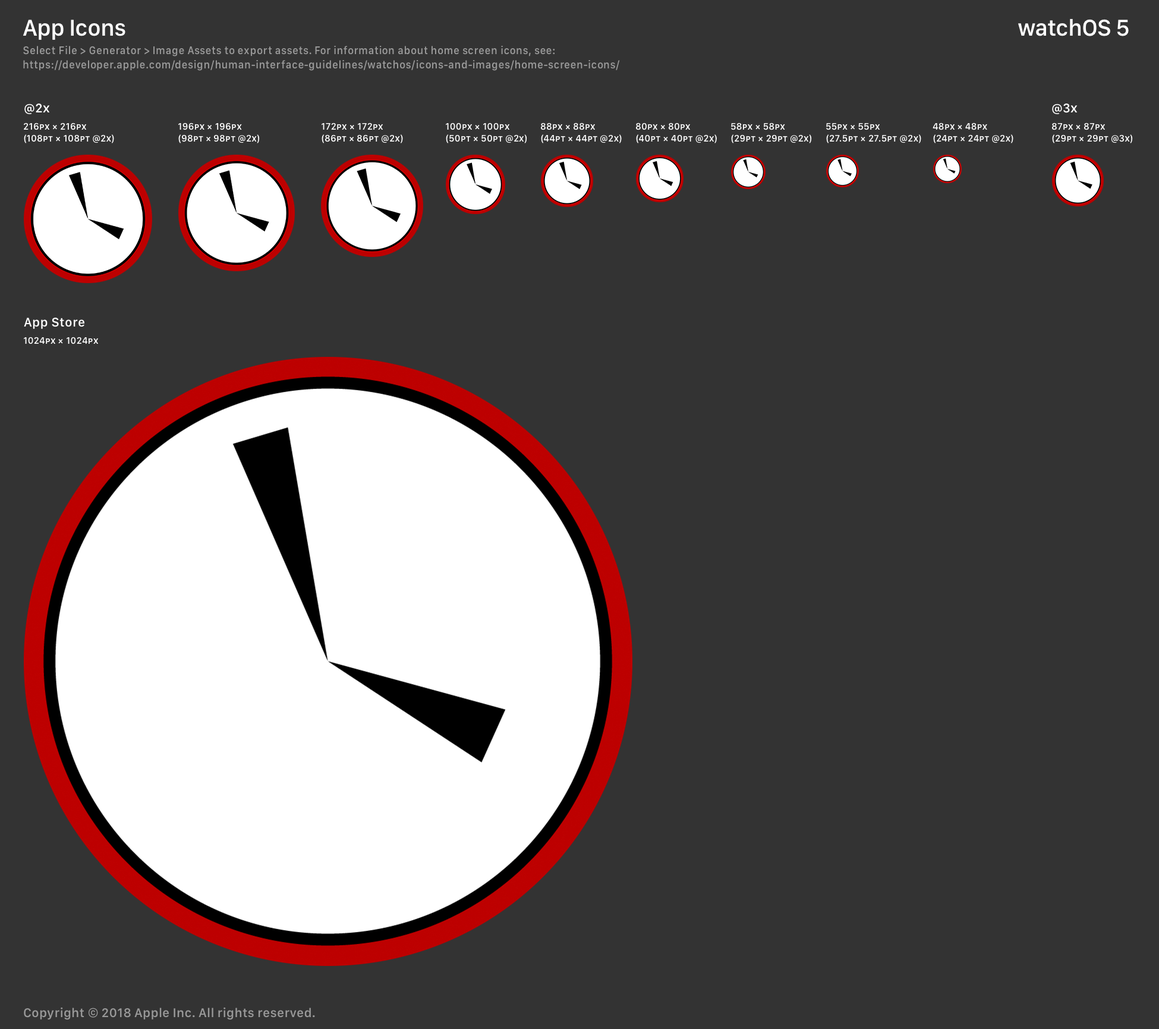
<style>
.page{position:relative;width:1159px;height:1029px;background:#333333}
.page>*{position:absolute;margin:0}
.t1{font:23.8px "SFCompactText-Medium";letter-spacing:-0.026em;color:#ffffff}
.t2{font:10.7px/14.3px "SFCompactText-Medium";letter-spacing:0.024em;color:#999999}
.t3{font:13.1px "SFCompactText-Medium";letter-spacing:0.015em;color:#ffffff;font-variant:small-caps}
.t4{font:9.5px/11.9px "SFCompactText-Medium";letter-spacing:0.015em;color:#ffffff;font-variant:small-caps}
.t5{font:13.1px "SFCompactText-Medium";letter-spacing:0.015em;color:#ffffff}
.t6{font:9.5px "SFCompactText-Medium";letter-spacing:0.015em;color:#ffffff}
.t7{font:9.5px "SFCompactText-Medium";letter-spacing:0.015em;color:#ffffff;font-variant:small-caps}
</style>
<div class="page">
<p class="t1" style="left:23px;top:20px;width:102px;height:20px">App Icons</p>
<p class="t1" style="left:1018px;top:18px;width:111px;height:18px">watchOS 5</p>
<p class="t2" style="left:23px;top:46px;width:597px;height:25px">Select File &gt; Generator &gt; Image Assets to export assets. For information about home screen icons, see:<br>https://developer.apple.com/design/human-interface-guidelines/watchos/icons-and-images/home-screen-icons/</p>
<p class="t3" style="left:24px;top:103px;width:26px;height:11px">@2x</p>
<p class="t3" style="left:1052px;top:103px;width:26px;height:11px">@3x</p>
<p class="t4" style="left:24px;top:122px;width:90px;height:21px">216px × 216px<br>(108pt × 108pt @2x)</p>
<p class="t4" style="left:178px;top:122px;width:82px;height:21px">196px × 196px<br>(98pt × 98pt @2x)</p>
<p class="t4" style="left:322px;top:122px;width:81px;height:21px">172px × 172px<br>(86pt × 86pt @2x)</p>
<p class="t4" style="left:446px;top:122px;width:81px;height:21px">100px × 100px<br>(50pt × 50pt @2x)</p>
<p class="t4" style="left:541px;top:122px;width:81px;height:21px">88px × 88px<br>(44pt × 44pt @2x)</p>
<p class="t4" style="left:636px;top:122px;width:81px;height:21px">80px × 80px<br>(40pt × 40pt @2x)</p>
<p class="t4" style="left:731px;top:122px;width:81px;height:21px">58px × 58px<br>(29pt × 29pt @2x)</p>
<p class="t4" style="left:826px;top:123px;width:96px;height:20px">55px × 55px<br>(27.5pt × 27.5pt @2x)</p>
<p class="t4" style="left:933px;top:122px;width:81px;height:21px">48px × 48px<br>(24pt × 24pt @2x)</p>
<p class="t4" style="left:1052px;top:122px;width:81px;height:21px">87px × 87px<br>(29pt × 29pt @3x)</p>
<p class="t5" style="left:24px;top:317px;width:60px;height:12px">App Store</p>
<p class="t6" style="left:24px;top:337px;width:74px;height:7px">1024<span class="t7">px × </span>1024<span class="t7">px</span></p>
</div>
